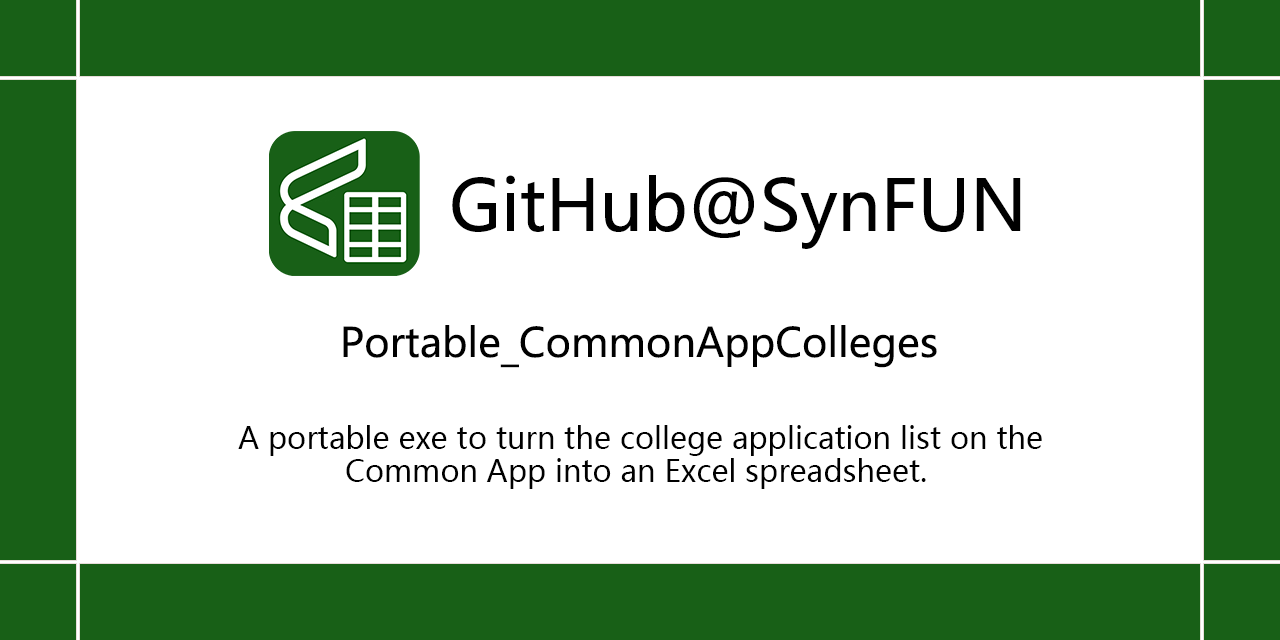
<style>
.page{position:relative;width:1280px;height:640px;background:#ffffff}
.page>*{position:absolute;margin:0}
.t1{font:70px "MicrosoftYaHei";color:#000000}
.t2{font:40px "MicrosoftYaHei";color:#000000}
.t3{font:30px/33px "MicrosoftYaHei";color:#000000}
</style>
<div class="page">
<p class="t1" style="left:452px;top:175px;width:569px;height:74px">GitHub@SynFUN</p>
<p class="t2" style="left:343px;top:325px;width:594px;height:43px">Portable_CommonAppColleges</p>
<p class="t3" style="left:238px;top:425px;width:804px;height:64px;text-align:center">A portable exe to turn the college application list on the <br>Common App into an Excel spreadsheet.</p>
</div>
